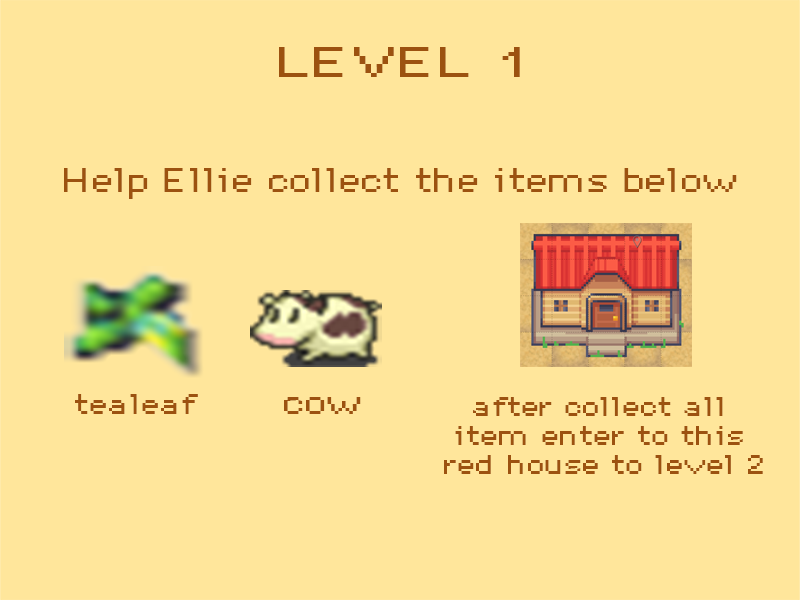
<style>
.page{position:relative;width:800px;height:600px;background:#ffe69b}
.page>*{position:absolute;margin:0}
.t1{font:37.8px "DePixel-Breit";color:#9c5210;scale:1.33 1}
.t2{font:29.8px "DePixel-Breit";color:#9c5210;scale:1.06 1}
.t3{font:25.3px "DePixel-Breit";color:#9c5210;scale:1.07 1}
.t4{font:24px "DePixel-Breit";color:#9c5210;scale:1.06 1}
</style>
<div class="page">
<p class="t1" style="left:279px;top:47px;width:241px;height:30px">LEVEL 1</p>
<p class="t2" style="left:64px;top:168px;width:673px;height:31px">Help Ellie collect the items below</p>
<p class="t3" style="left:75px;top:394px;width:123px;height:20px">tealeaf</p>
<p class="t2" style="left:284px;top:397px;width:77px;height:17px">cow</p>
<p class="t4" style="left:444px;top:397px;width:319px;height:77px;text-align:center">after collect all <br>item enter to this <br>red house to level 2</p>
</div>
